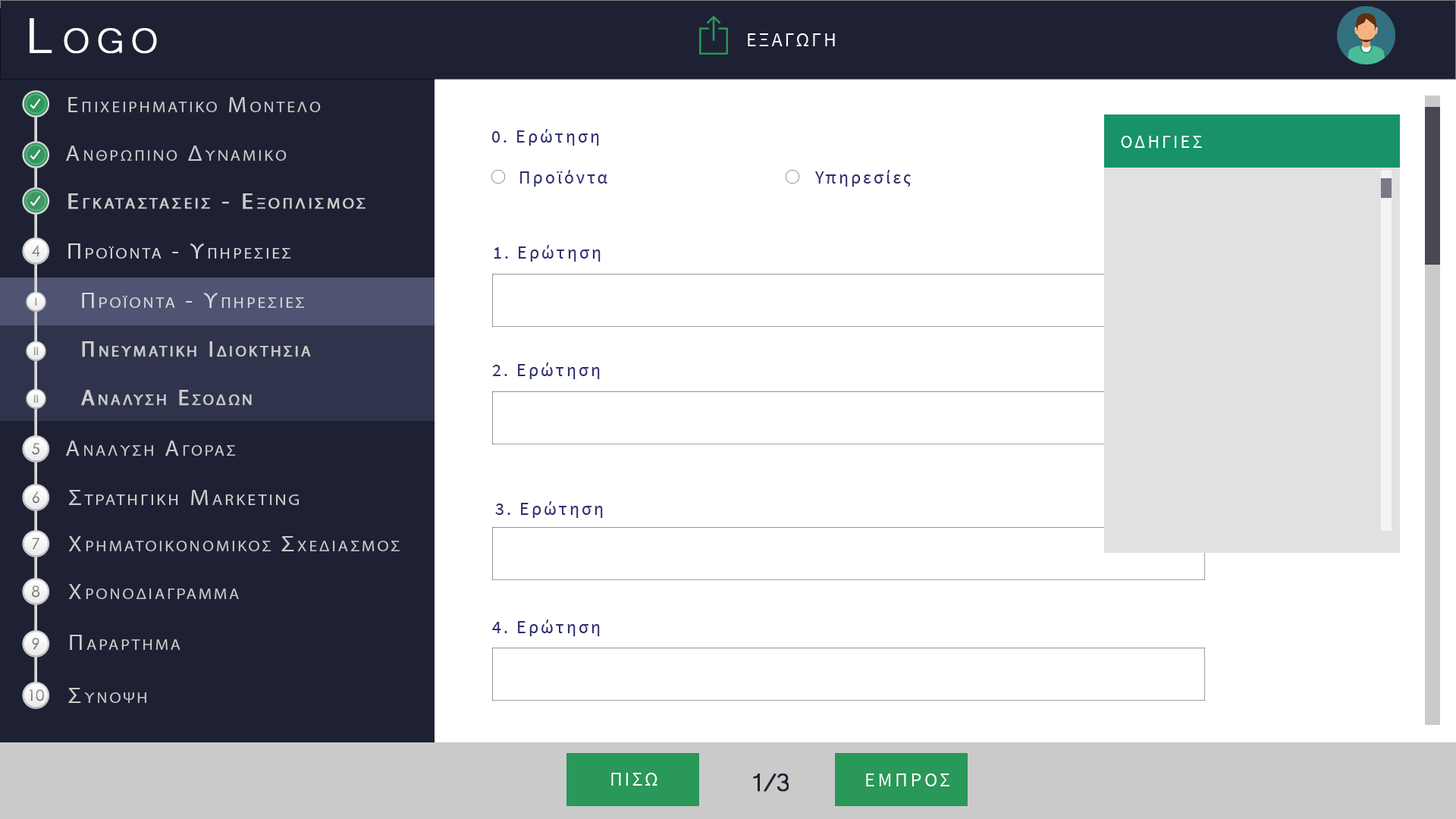
<style>
.page{position:relative;width:1456px;height:819px;background:#ffffff}
.page>*{position:absolute;margin:0}
.t1{font:63.7px "Microsoft-Yi-Baiti";letter-spacing:0.13em;color:#ffffff;font-variant:small-caps;font-weight:bold}
.t2{font:20px "SourceSansPro-Regular";letter-spacing:0.1em;color:#fefefe;text-transform:uppercase}
.t3{font:21.7px "MyriadPro-Regular";letter-spacing:0.13em;color:#cbcaca;font-variant:small-caps;scale:1.09 1}
.t4{font:23.4px "Microsoft-Yi-Baiti";letter-spacing:0.13em;color:#cbcaca;font-variant:small-caps;font-weight:bold}
.t5{font:18.2px "SourceSansPro-Regular";letter-spacing:0.13em;color:#2f2f70}
.t6{font:18.2px "SourceSansPro-Regular";letter-spacing:0.13em;color:#2f2f70;text-transform:uppercase}
.t7{font:18.2px "SourceSansPro-Regular";letter-spacing:0.13em;color:#fefefe;text-transform:uppercase}
.t8{font:21.7px "MyriadPro-Regular";letter-spacing:0.13em;color:#fefefe;font-variant:small-caps;scale:1.09 1}
.t9{font:21.7px/91px "MyriadPro-Regular";letter-spacing:0.13em;color:#cbcaca;font-variant:small-caps;font-weight:bold;scale:1.09 1}
.t10{font:23.4px/91px "Microsoft-Yi-Baiti";letter-spacing:0.13em;color:#cbcaca;font-variant:small-caps;font-weight:bold}
.t11{font:15.3px "CenturyGothic";color:#878787}
.t12{font:21.7px "MyriadPro-Regular";letter-spacing:0.13em;color:#d6d6d6;font-variant:small-caps;scale:1.09 1}
.t13{font:23.4px "Microsoft-Yi-Baiti";letter-spacing:0.13em;color:#d6d6d6;font-variant:small-caps;font-weight:bold}
.t14{font:11.2px "CenturyGothic";color:#808080}
.t15{font:22.3px "MyriadPro-Regular";letter-spacing:0.13em;color:#cbcaca;font-variant:small-caps;font-weight:bold}
.t16{font:11.2px "CenturyGothic";color:#828282}
.t17{font:15.3px "CenturyGothic";color:#898989}
.t18{font:15.3px "CenturyGothic";color:#838383}
.t19{font:22.2px "MyriadPro-Regular";letter-spacing:0.13em;color:#cbcaca;font-variant:small-caps;scale:1.09 1}
.t20{font:25.5px "Microsoft-Yi-Baiti";letter-spacing:0.13em;color:#cbcaca;font-variant:small-caps;font-weight:bold}
.t21{font:15.3px "CenturyGothic";color:#888888}
.t22{font:15.3px "CenturyGothic";color:#8b8b8b}
.t23{font:23.7px "Microsoft-Yi-Baiti";letter-spacing:0.13em;color:#cbcaca;font-variant:small-caps;scale:1.09 1}
.t24{font:32.8px "Microsoft-Yi-Baiti";letter-spacing:-0.1em;color:#1e2133;font-weight:bold}
.t25{font:20px "SourceSansPro-Regular";letter-spacing:0.13em;color:#fefefe;text-transform:uppercase}
</style>
<div class="page">
<p class="t1" style="left:30px;top:18px;width:127px;height:36px">Logo</p>
<p class="t2" style="left:748px;top:33px;width:87px;height:13px">εξαγωγη</p>
<p class="t3" style="left:68px;top:97px;width:253px;height:15px"><span class="t4">   </span>Επιχειρηματικο Μοντελο</p>
<p class="t5" style="left:492px;top:129px;width:107px;height:17px"><span class="t6">0. </span>Ερώτηση</p>
<p class="t7" style="left:1121px;top:136px;width:81px;height:12px"><span class="t8"> </span>Οδηγιεσ</p>
<p class="t3" style="left:66px;top:146px;width:221px;height:15px"><span class="t4">   </span>Ανθρωπινο Δυναμικο</p>
<p class="t5" style="left:520px;top:170px;width:87px;height:17px">Προϊόντα</p>
<p class="t5" style="left:815px;top:170px;width:96px;height:17px">Υπηρεσίες</p>
<p class="t9" style="left:68px;top:193px;width:298px;height:16px"><span class="t10">   </span>Εγκαταστασεισ - Εξοπλισμοσ<br><br><span class="t10">Equipment</span></p>
<p class="t11" style="left:32px;top:245px;width:8px;height:12px">4</p>
<p class="t12" style="left:68px;top:243px;width:223px;height:16px"><span class="t13">   </span>Προϊοντα - Υπηρεσιεσ</p>
<p class="t5" style="left:494px;top:245px;width:107px;height:17px"><span class="t6">1. </span>Ερώτηση</p>
<p class="t12" style="left:82px;top:293px;width:223px;height:15px"><span class="t13">   </span>Προϊοντα - Υπηρεσιεσ</p>
<p class="t14" style="left:35px;top:297px;width:1px;height:9px">I</p>
<p class="t15" style="left:82px;top:341px;width:229px;height:16px">Πνευματικη Ιδιοκτησια</p>
<p class="t16" style="left:34px;top:347px;width:4px;height:9px">II</p>
<p class="t5" style="left:492px;top:362px;width:108px;height:17px"><span class="t6">2. </span>Ερώτηση</p>
<p class="t15" style="left:81px;top:390px;width:171px;height:16px">Αναλυση Εσοδων</p>
<p class="t16" style="left:34px;top:394px;width:4px;height:9px">II</p>
<p class="t17" style="left:32px;top:443px;width:7px;height:12px">5</p>
<p class="t3" style="left:66px;top:441px;width:170px;height:15px"><span class="t4">   </span>Αναλυση Αγορασ</p>
<p class="t18" style="left:32px;top:491px;width:7px;height:13px">6</p>
<p class="t19" style="left:69px;top:490px;width:230px;height:15px"><span class="t20">   </span>Στρατηγικη Marketing</p>
<p class="t5" style="left:495px;top:501px;width:108px;height:17px"><span class="t6">3. </span>Ερώτηση</p>
<p class="t21" style="left:32px;top:538px;width:8px;height:12px">7</p>
<p class="t3" style="left:68px;top:536px;width:332px;height:15px"><span class="t20">   </span>Χρηματοικονομικοσ Σχεδιασμοσ</p>
<p class="t22" style="left:32px;top:585px;width:8px;height:13px">8</p>
<p class="t3" style="left:68px;top:584px;width:171px;height:15px"><span class="t20">   </span>Χρονοδιαγραμμα</p>
<p class="t5" style="left:492px;top:620px;width:108px;height:16px"><span class="t6">4. </span>Ερώτηση</p>
<p class="t18" style="left:32px;top:638px;width:7px;height:12px">9</p>
<p class="t3" style="left:70px;top:635px;width:110px;height:15px"><span class="t23">   </span>Παραρτημα</p>
<p class="t11" style="left:29px;top:689px;width:15px;height:12px">10</p>
<p class="t3" style="left:68px;top:688px;width:78px;height:15px"><span class="t23">   </span>Συνοψη</p>
<p class="t2" style="left:611px;top:773px;width:46px;height:13px">Πισω</p>
<p class="t24" style="left:753px;top:773px;width:36px;height:19px">1/3</p>
<p class="t25" style="left:866px;top:773px;width:83px;height:13px">εμπροσ</p>
</div>
